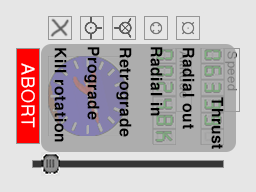
<style>
.page{position:relative;width:256px;height:192px;background:#e6e6e6}
.page>*{position:absolute;margin:0}
.t1{font:16px "Helvetica-Bold";letter-spacing:0.05em;color:#000000}
.t2{font:24px "Digital-7Mono";letter-spacing:0.05em}
.t3{font:12px "Helvetica";letter-spacing:0.05em;color:#7f7f7f;scale:1.07 1}
.t4{font:18px "Helvetica";letter-spacing:0.05em;color:#ffffff}
.t5{font:24px "Digital-7Mono";letter-spacing:0.05em;color:#7fa87f}
</style>
<div class="page">
<p class="t1" style="left:54px;top:48px;width:13px;height:94px;rotate:90deg">Kill rotation</p>
<p class="t1" style="left:84px;top:47px;width:16px;height:73px;rotate:90deg">Prograde</p>
<p class="t1" style="left:116px;top:48px;width:16px;height:89px;rotate:90deg">Retrograde</p>
<p class="t1" style="left:150px;top:47px;width:13px;height:69px;rotate:90deg">Radial in</p>
<p class="t1" style="left:182px;top:48px;width:13px;height:81px;rotate:90deg">Radial out</p>
<p class="t2" style="left:204px;top:50px;width:17px;height:11px;rotate:90deg">8</p>
<p class="t3" style="left:225px;top:51px;width:12px;height:40px;rotate:90deg">Speed</p>
<p class="t4" style="left:21px;top:63px;width:14px;height:65px;rotate:90deg">ABORT</p>
<p class="t5" style="left:204px;top:66px;width:17px;height:11px;rotate:90deg">8</p>
<p class="t5" style="left:204px;top:82px;width:17px;height:11px;rotate:90deg">8</p>
<p class="t1" style="left:211px;top:97px;width:13px;height:52px;rotate:90deg">Thrust</p>
</div>
